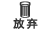
<style>
.page{position:relative;width:52px;height:31px;background:#ffffff}
.page>*{position:absolute;margin:0}
.t1{font:10.5px "MicrosoftYaHei";letter-spacing:0.24em;color:#333333;font-weight:bold}
</style>
<div class="page">
<p class="t1" style="left:13px;top:18px;width:25px;height:11px">放弃</p>
</div>
